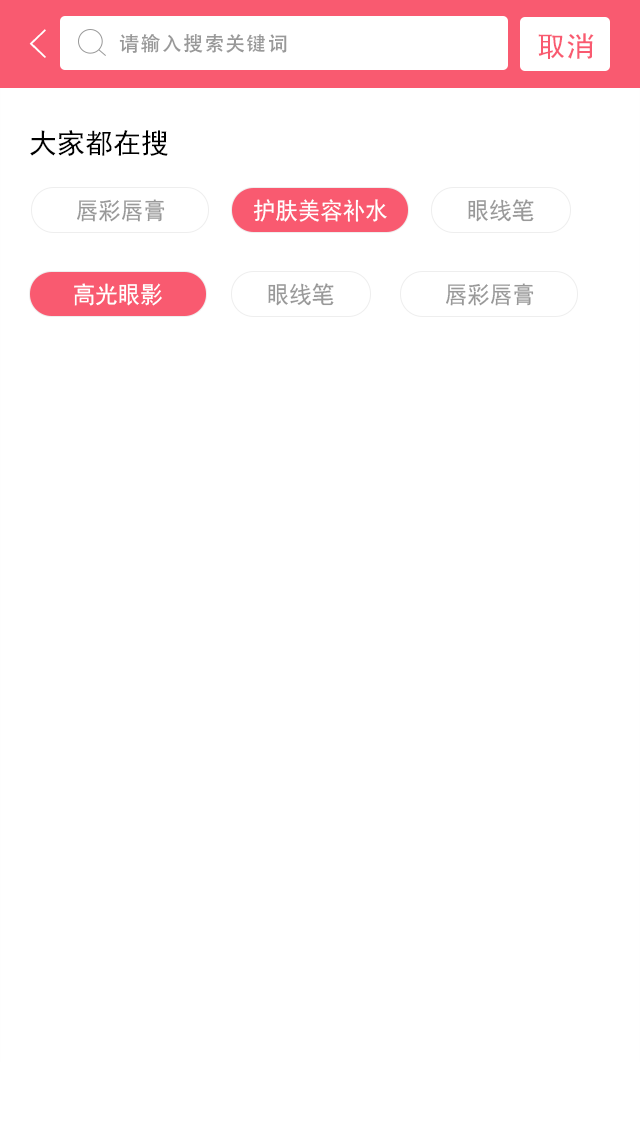
<style>
.page{position:relative;width:640px;height:1136px;background:#ffffff}
.page>*{position:absolute;margin:0}
.t1{font:40px "FZYXJW--GB1-0";color:#ffffff}
.t2{font:20px "AdobeHeitiStd-Regular";letter-spacing:0.06em;color:#999999}
.t3{font:28px "SimHei";letter-spacing:0.06em;color:#f95a70}
.t4{font:28px "SimHei";color:#000000}
.t5{font:24px "SimHei";color:#999999;scale:0.94 1}
.t6{font:24px "SimHei";color:#ffffff;scale:0.94 1}
</style>
<div class="page">
<p class="t1" style="left:29px;top:29px;width:17px;height:29px">&lt;</p>
<p class="t2" style="left:119px;top:34px;width:168px;height:19px">请输入搜索关键词</p>
<p class="t3" style="left:538px;top:33px;width:56px;height:26px">取消</p>
<p class="t4" style="left:30px;top:130px;width:138px;height:26px">大家都在搜</p>
<p class="t5" style="left:77px;top:199px;width:88px;height:23px">唇彩唇膏</p>
<p class="t6" style="left:253px;top:199px;width:134px;height:23px">护肤美容补水</p>
<p class="t5" style="left:468px;top:199px;width:66px;height:23px">眼线笔</p>
<p class="t6" style="left:74px;top:283px;width:88px;height:23px">高光眼影</p>
<p class="t5" style="left:268px;top:283px;width:66px;height:23px">眼线笔</p>
<p class="t5" style="left:446px;top:283px;width:88px;height:23px">唇彩唇膏</p>
</div>
